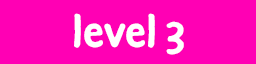
<style>
.page{position:relative;width:256px;height:64px;background:#ff00b4}
.page>*{position:absolute;margin:0}
.t1{font:48px "DuperPro-Bold";color:#ffffff}
</style>
<div class="page">
<p class="t1" style="left:74px;top:13px;width:110px;height:42px">level 3</p>
</div>
